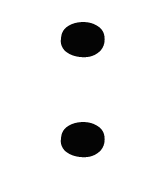
<style>
.page{position:relative;width:160px;height:175px;background:#ffffff}
.page>*{position:absolute;margin:0}
.t1{font:150px/100px "VPS-Ninh-Binh-Hoa";color:#040404}
</style>
<div class="page">
<p class="t1" style="left:60px;top:22px;width:45px;height:136px;text-align:right">.<br>.</p>
</div>
